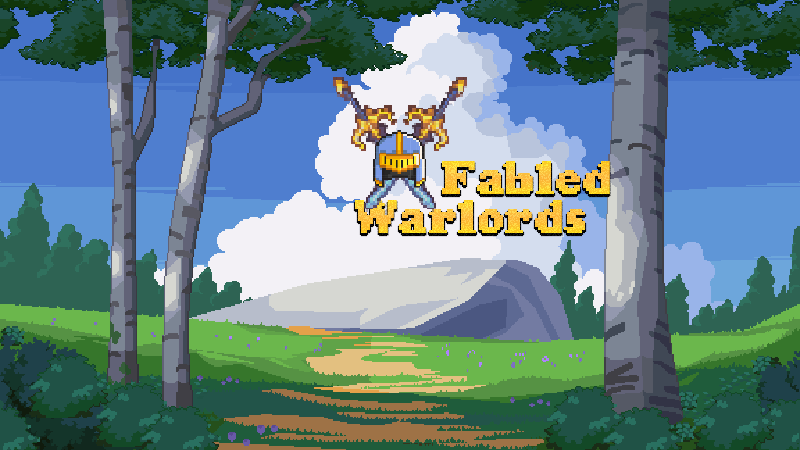
<style>
.page{position:relative;width:800px;height:450px}
.page>*{position:absolute;margin:0}
.t1{font:48px "CooperBits";letter-spacing:-0.01em}
</style>
<div class="page">
<p class="t1" style="left:442px;top:161px;width:168px;height:33px">Fabled</p>
<p class="t1" style="left:355px;top:200px;width:230px;height:33px">Warlords</p>
</div>
